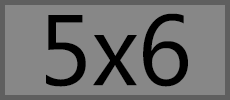
<style>
.page{position:relative;width:230px;height:100px;background:#878787}
.page>*{position:absolute;margin:0}
.t1{font:100px "MicrosoftNewTaiLue";color:#000000}
</style>
<div class="page">
<p class="t1" style="left:46px;top:13px;width:142px;height:74px">5x6</p>
</div>
